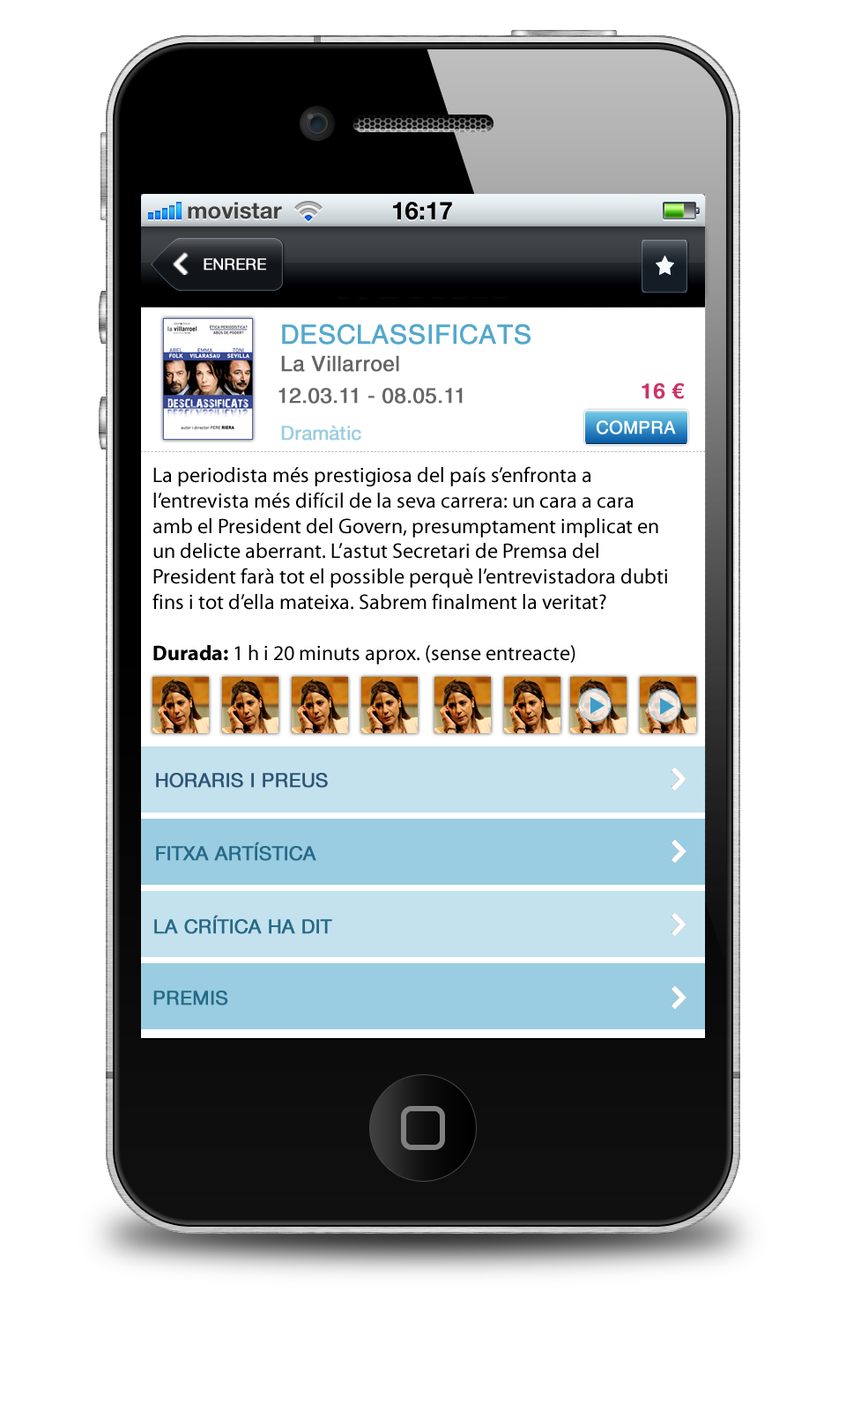
<style>
.page{position:relative;width:846px;height:1410px;background:#ffffff}
.page>*{position:absolute;margin:0}
.t1{font:26.4px "BaltHelveticaMedium";color:#53a8cc;font-weight:bold}
.t2{font:21.1px "BaltHelveticaMedium";color:#666666;font-weight:bold}
.t3{font:21.1px "HelveticaNeueLTPro-Md";color:#cc3366;font-weight:bold}
.t4{font:19.4px "HelveticaNeueLTPro-Roman";color:#9acde2;font-weight:bold}
.t5{font:21.1px/25.4px "MyriadPro-Regular";color:#000000}
.t6{font:21.1px/25.4px "MyriadPro-Bold";color:#000000}
</style>
<div class="page">
<p class="t1" style="left:282px;top:323px;width:248px;height:22px">DESCLASSIFICATS</p>
<p class="t2" style="left:281px;top:355px;width:118px;height:17px">La Villarroel</p>
<p class="t2" style="left:278px;top:388px;width:185px;height:16px">12.03.11 - 08.05.11</p>
<p class="t3" style="left:641px;top:382px;width:44px;height:17px">16 €</p>
<p class="t4" style="left:281px;top:426px;width:80px;height:15px">Dramàtic</p>
<p class="t5" style="left:152px;top:466px;width:515px;height:198px">La periodista més prestigiosa del país s’enfronta a l’entrevista més difícil de la seva carrera: un cara a cara amb el President del Govern, presumptament implicat en un delicte aberrant. L’astut Secretari de Premsa del President farà tot el possible perquè l’entrevistadora dubti fins i tot d’ella mateixa. Sabrem finalment la veritat? <br><br><span class="t6">Durada:</span> 1 h i 20 minuts aprox. (sense entreacte)</p>
</div>
